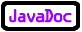
<style>
.page{position:relative;width:82px;height:32px;background:#ffffff}
.page>*{position:absolute;margin:0}
.t1{font:16px "OCRAStd";letter-spacing:-0.18em;color:#9c00ff;font-weight:bold}
</style>
<div class="page">
<p class="t1" style="left:9px;top:9px;width:63px;height:14px">JavaDoc</p>
</div>
